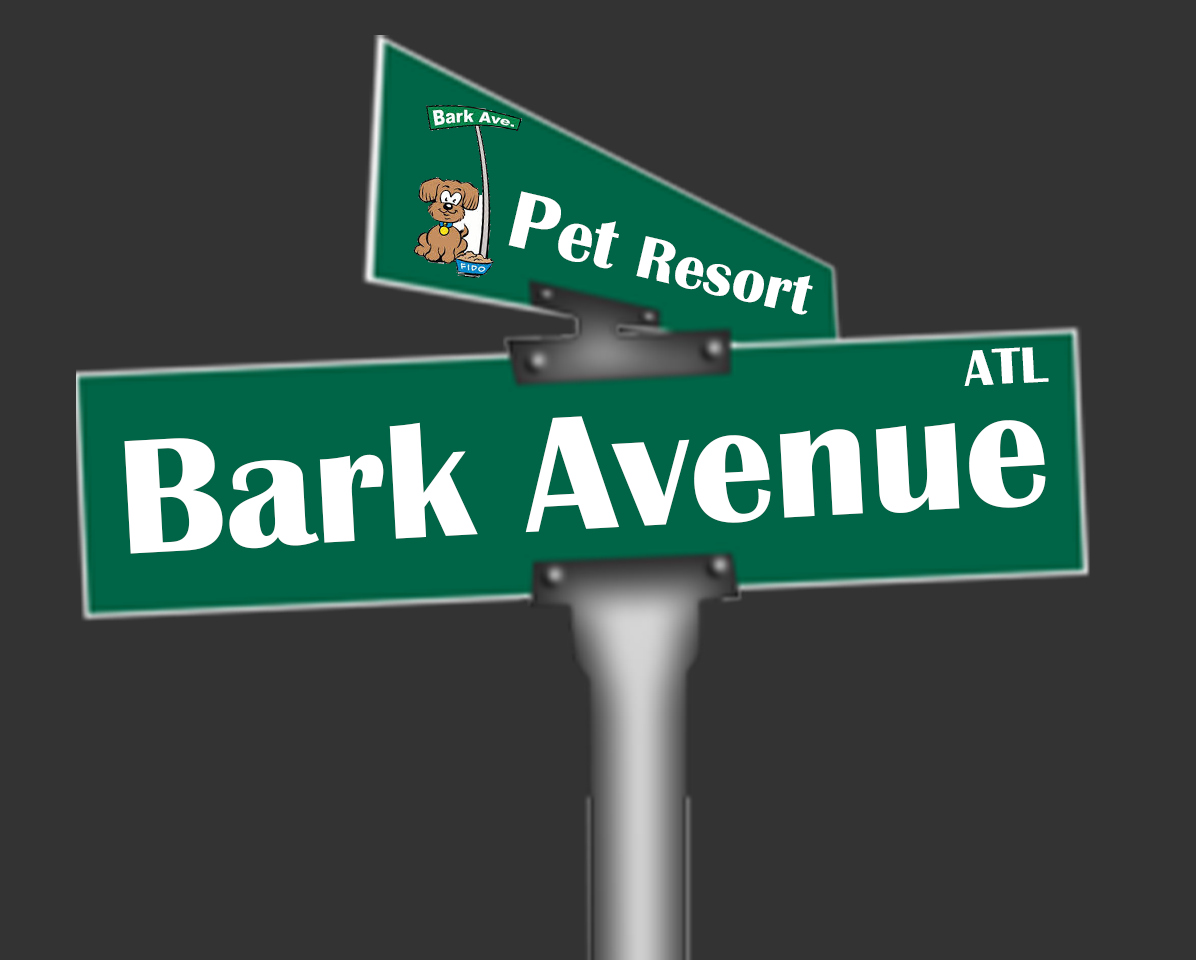
<style>
.page{position:relative;width:1196px;height:960px;background:#333333}
.page>*{position:absolute;margin:0}
.t1{font:61.2px "BritannicBold";color:#ffffff}
.t2{font:83px "BritannicBold";color:#ffffff}
.t3{font:73.8px "BritannicBold";color:#ffffff}
.t4{font:52.6px "BritannicBold";color:#ffffff}
.t5{font:168.7px "BritannicBold";color:#ffffff}
</style>
<div class="page">
<p class="t1" style="left:508px;top:191px;width:305px;height:124px;rotate:13deg"><span class="t2">P</span><span class="t3">et </span>Resort</p>
<p class="t4" style="left:964px;top:347px;width:85px;height:39px;rotate:-3deg">ATL</p>
<p class="t5" style="left:124px;top:416px;width:922px;height:138px;rotate:-3deg">Bark Avenue</p>
</div>
